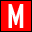
<style>
.page{position:relative;width:32px;height:32px;background:#ff0000}
.page>*{position:absolute;margin:0}
.t1{font:32px "AgencyFB-Bold";letter-spacing:0.04em;color:#ffffff}
</style>
<div class="page">
<p class="t1" style="left:8px;top:4px;width:16px;height:24px">M</p>
</div>
